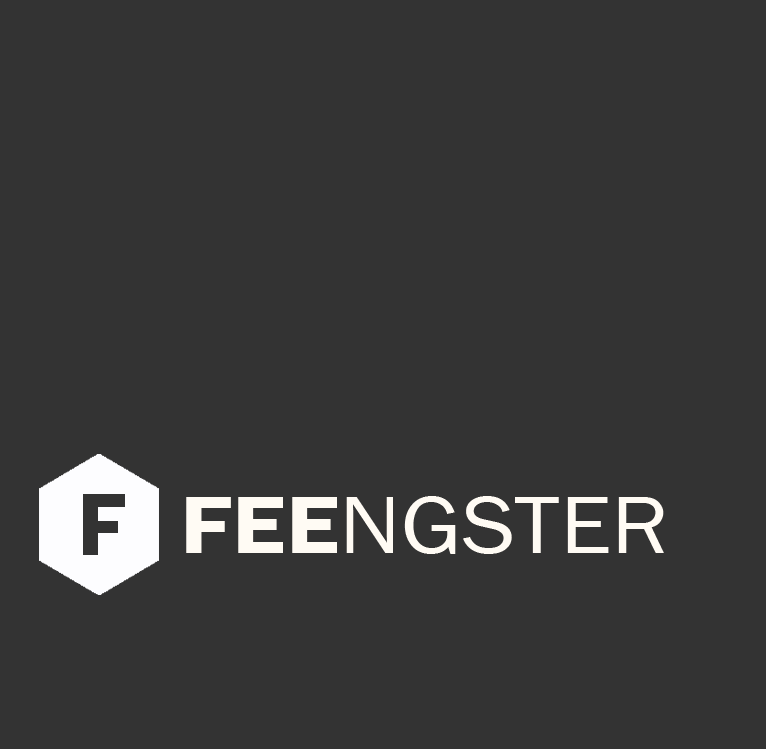
<style>
.page{position:relative;width:766px;height:749px;background:#333333}
.page>*{position:absolute;margin:0}
.t1{font:84.2px "FranklinGothic-Book";color:#fffbf4;scale:1.12 1}
.t2{font:84.2px "FranklinGothic-Demi";color:#fffbf4;scale:1.12 1}
</style>
<div class="page">
<p class="t1" style="left:186px;top:496px;width:478px;height:58px"><span class="t2">FEE</span>NGSTER</p>
</div>
